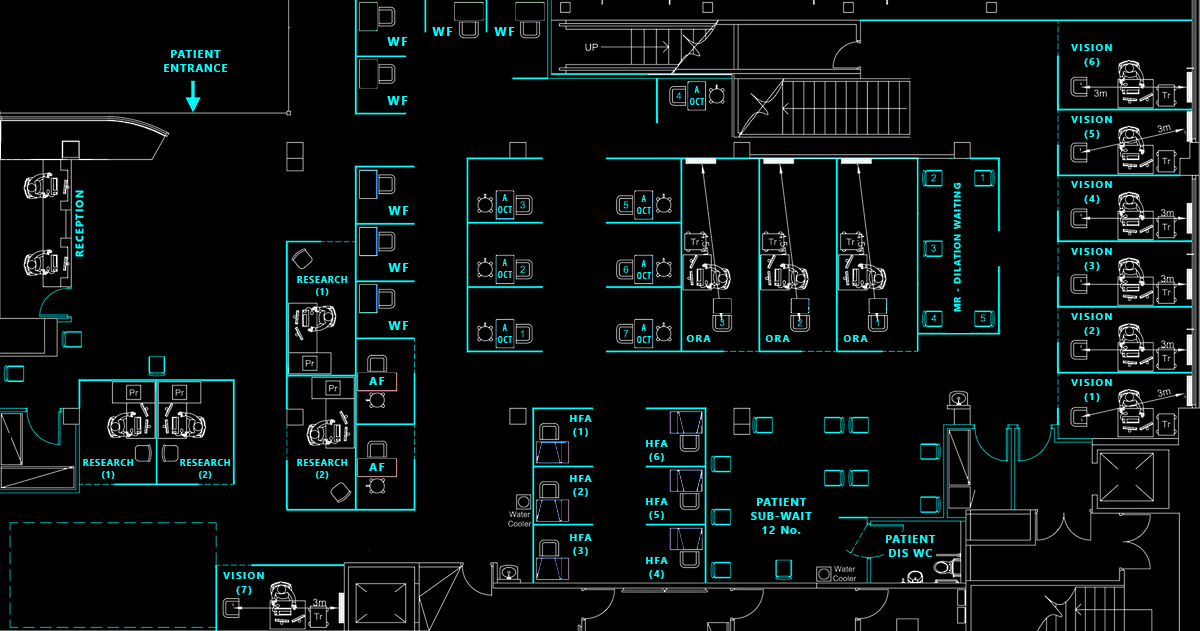
<style>
.page{position:relative;width:1200px;height:631px;background:#000000}
.page>*{position:absolute;margin:0}
.t1{font:12.2px "SegoeUI-Bold";letter-spacing:0.12em;color:#00ffff}
.t2{font:10.6px/7.1px "SegoeUI-Bold";letter-spacing:0.12em;color:#00ffff}
.t3{font:10.4px/7px "SegoeUI-Bold";letter-spacing:0.12em;color:#00ffff}
.t4{font:8.7px/5.9px "SegoeUI-Semibold";letter-spacing:0.12em;color:#00ffff;scale:0.73 1}
.t5{font:9px "SegoeUI-Bold";letter-spacing:0.12em;color:#00ffff}
.t6{font:10.6px "SegoeUI-Bold";letter-spacing:0.12em;color:#00ffff}
.t7{font:8.6px/5.8px "SegoeUI-Bold";letter-spacing:0.12em;color:#00ffff}
.t8{font:10.2px "SegoeUI-Bold";letter-spacing:0.12em;color:#00ffff}
.t9{font:11.4px "SegoeUI-Bold";letter-spacing:0.12em;color:#00ffff}
.t10{font:10.2px/6.9px "SegoeUI-Bold";letter-spacing:0.12em;color:#00ffff}
</style>
<div class="page">
<p class="t1" style="left:432px;top:27px;width:21px;height:9px">WF</p>
<p class="t1" style="left:494px;top:27px;width:21px;height:9px">WF</p>
<p class="t1" style="left:387px;top:37px;width:21px;height:9px">WF</p>
<p class="t2" style="left:164px;top:50px;width:64px;height:22px;text-align:center">PATIENT<br><br>ENTRANCE</p>
<p class="t3" style="left:1071px;top:44px;width:41px;height:23px;text-align:center">VISION<br><br>(6)</p>
<p class="t4" style="left:690px;top:86px;width:14px;height:19px;text-align:center">A<br><br>OCT</p>
<p class="t1" style="left:387px;top:96px;width:21px;height:9px">WF</p>
<p class="t3" style="left:1071px;top:116px;width:41px;height:23px;text-align:center">VISION<br><br>(5)</p>
<p class="t5" style="left:953px;top:182px;width:8px;height:130px;rotate:-90deg">MR - DILATION WAITING</p>
<p class="t3" style="left:1071px;top:181px;width:41px;height:23px;text-align:center">VISION<br><br>(4)</p>
<p class="t6" style="left:75px;top:190px;width:9px;height:67px;rotate:-90deg">RECEPTION</p>
<p class="t4" style="left:498px;top:194px;width:14px;height:19px;text-align:center">A<br><br>OCT</p>
<p class="t4" style="left:637px;top:195px;width:14px;height:19px;text-align:center">A<br><br>OCT</p>
<p class="t1" style="left:388px;top:206px;width:21px;height:9px">WF</p>
<p class="t3" style="left:1071px;top:248px;width:41px;height:23px;text-align:center">VISION<br><br>(3)</p>
<p class="t1" style="left:388px;top:263px;width:21px;height:9px">WF</p>
<p class="t4" style="left:498px;top:259px;width:14px;height:19px;text-align:center">A<br><br>OCT</p>
<p class="t4" style="left:637px;top:260px;width:14px;height:19px;text-align:center">A<br><br>OCT</p>
<p class="t7" style="left:297px;top:276px;width:50px;height:20px;text-align:center">RESEARCH<br><br>(1)</p>
<p class="t3" style="left:1071px;top:313px;width:41px;height:23px;text-align:center">VISION<br><br>(2)</p>
<p class="t1" style="left:388px;top:321px;width:21px;height:9px">WF</p>
<p class="t4" style="left:498px;top:324px;width:14px;height:19px;text-align:center">A<br><br>OCT</p>
<p class="t4" style="left:637px;top:324px;width:14px;height:19px;text-align:center">A<br><br>OCT</p>
<p class="t8" style="left:686px;top:335px;width:25px;height:7px">ORA</p>
<p class="t8" style="left:765px;top:335px;width:25px;height:7px">ORA</p>
<p class="t8" style="left:843px;top:335px;width:25px;height:7px">ORA</p>
<p class="t9" style="left:369px;top:377px;width:16px;height:8px">AF</p>
<p class="t3" style="left:1071px;top:379px;width:41px;height:23px;text-align:center">VISION<br><br>(1)</p>
<p class="t10" style="left:570px;top:415px;width:22px;height:22px;text-align:center">HFA<br><br>(1)</p>
<p class="t10" style="left:646px;top:440px;width:22px;height:22px;text-align:center">HFA<br><br>(6)</p>
<p class="t7" style="left:83px;top:459px;width:50px;height:20px;text-align:center">RESEARCH<br><br>(1)</p>
<p class="t7" style="left:180px;top:459px;width:50px;height:20px;text-align:center">RESEARCH<br><br>(2)</p>
<p class="t7" style="left:297px;top:459px;width:50px;height:20px;text-align:center">RESEARCH<br><br>(2)</p>
<p class="t9" style="left:369px;top:463px;width:16px;height:8px">AF</p>
<p class="t10" style="left:570px;top:475px;width:22px;height:22px;text-align:center">HFA<br><br>(2)</p>
<p class="t10" style="left:646px;top:498px;width:22px;height:22px;text-align:center">HFA<br><br>(5)</p>
<p class="t2" style="left:751px;top:498px;width:61px;height:36px;text-align:center">PATIENT<br><br>SUB-WAIT<br><br>12 No.</p>
<p class="t10" style="left:570px;top:534px;width:22px;height:22px;text-align:center">HFA<br><br>(3)</p>
<p class="t2" style="left:886px;top:535px;width:50px;height:22px;text-align:center">PATIENT<br><br>DIS WC</p>
<p class="t10" style="left:646px;top:557px;width:22px;height:22px;text-align:center">HFA<br><br>(4)</p>
<p class="t3" style="left:223px;top:572px;width:41px;height:23px;text-align:center">VISION<br><br>(7)</p>
</div>
